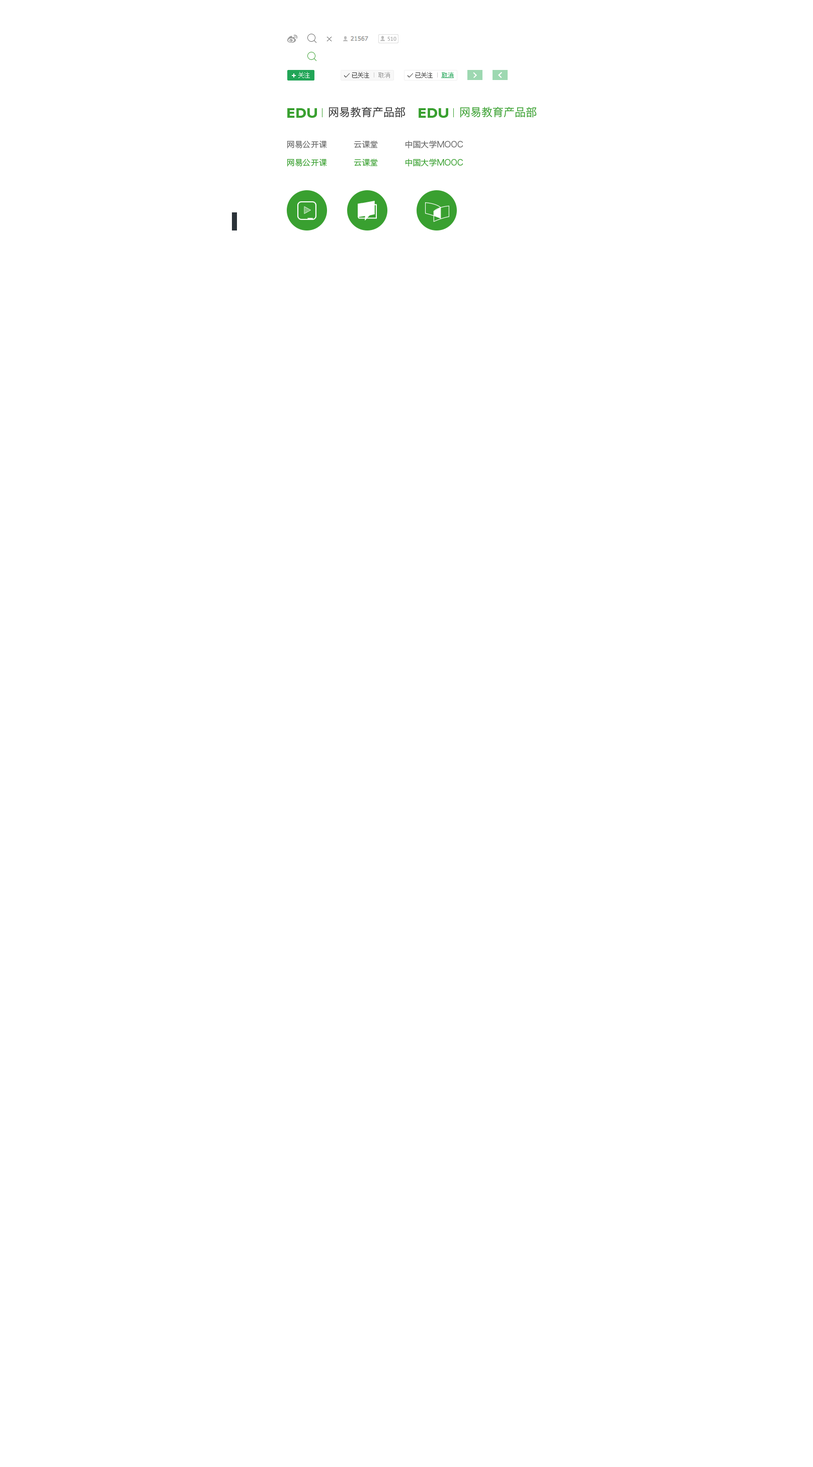
<style>
.page{position:relative;width:813px;height:1467px;background:#ffffff}
.page>*{position:absolute;margin:0}
.t1{font:6px "SimSun";color:#ffffff}
.t2{font:14.1px "GillSansMT-Bold";color:#39a030}
.t3{font:11.1px "HiraginoSansGB-W3";color:#333333}
.t4{font:11.1px "HiraginoSansGB-W3";color:#39a030}
.t5{font:8.1px "HiraginoSansGB-W3";color:#666666}
.t6{font:8.1px "HiraginoSansGB-W3";color:#39a030}
</style>
<div class="page">
<p class="t1" style="left:298px;top:72px;width:12px;height:6px">关注</p>
<p class="t2" style="left:287px;top:108px;width:30px;height:10px">EDU</p>
<p class="t3" style="left:329px;top:107px;width:76px;height:11px">网易教育产品部</p>
<p class="t2" style="left:419px;top:108px;width:29px;height:10px">EDU</p>
<p class="t4" style="left:460px;top:107px;width:76px;height:11px">网易教育产品部</p>
<p class="t5" style="left:287px;top:140px;width:176px;height:8px">网易公开课          云课堂          中国大学MOOC</p>
<p class="t6" style="left:287px;top:158px;width:176px;height:9px">网易公开课          云课堂          中国大学MOOC</p>
</div>
